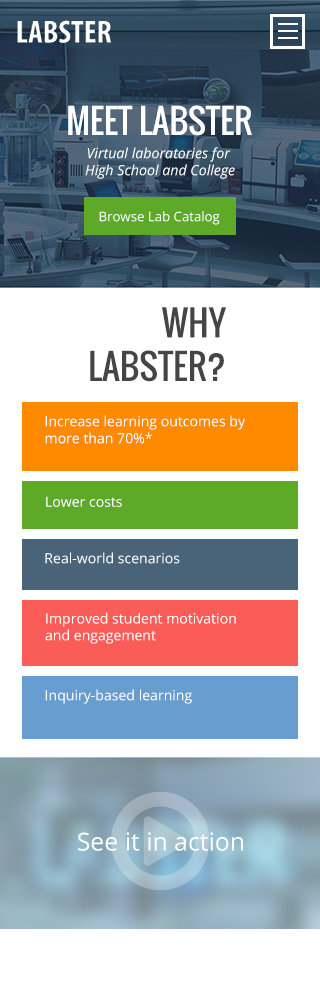
<style>
.page{position:relative;width:320px;height:1000px;background:#ffffff}
.page>*{position:absolute;margin:0}
.t1{font:33.4px "Oswald-Regular";color:#ffffff}
.t2{font:14.2px "OpenSans-Italic";color:#ffffff}
.t3{font:13.3px "OpenSans";color:#ffffff}
.t4{font:34.6px/43.6px "Oswald-Regular";color:#454545}
.t5{font:14.1px "OpenSans";color:#ffffff}
.t6{font:24.8px "OpenSans";color:#ffffff}
</style>
<div class="page">
<p class="t1" style="left:68px;top:105px;width:184px;height:31px">MEET LABSTER</p>
<p class="t2" style="left:85px;top:147px;width:150px;height:32px;text-align:center">Virtual laboratories for <br>High School and College</p>
<p class="t3" style="left:99px;top:211px;width:121px;height:14px">Browse Lab Catalog</p>
<p class="t4" style="left:90px;top:307px;width:136px;height:75px;text-align:right">WHY<br>LABSTER?</p>
<p class="t5" style="left:45px;top:415px;width:200px;height:29px">Increase learning outcomes by more than 70%*</p>
<p class="t5" style="left:46px;top:496px;width:76px;height:11px">Lower costs</p>
<p class="t5" style="left:45px;top:552px;width:135px;height:12px">Real-world scenarios</p>
<p class="t5" style="left:45px;top:612px;width:191px;height:32px">Improved student motivation and engagement</p>
<p class="t5" style="left:45px;top:689px;width:147px;height:15px">Inquiry-based learning</p>
<p class="t6" style="left:78px;top:832px;width:165px;height:19px">See it in action</p>
</div>
